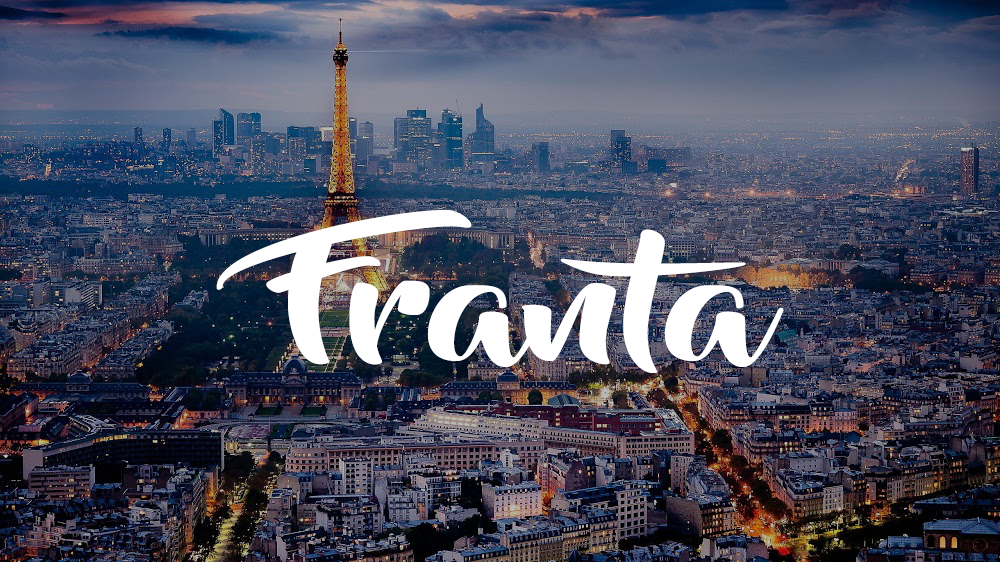
<style>
.page{position:relative;width:1000px;height:562px}
.page>*{position:absolute;margin:0}
.t1{font:141px "BeyondTheMountains";letter-spacing:-0.02em;color:#ffffff;scale:1.4 1}
</style>
<div class="page">
<p class="t1" style="left:216px;top:210px;width:568px;height:163px">Franta</p>
</div>
